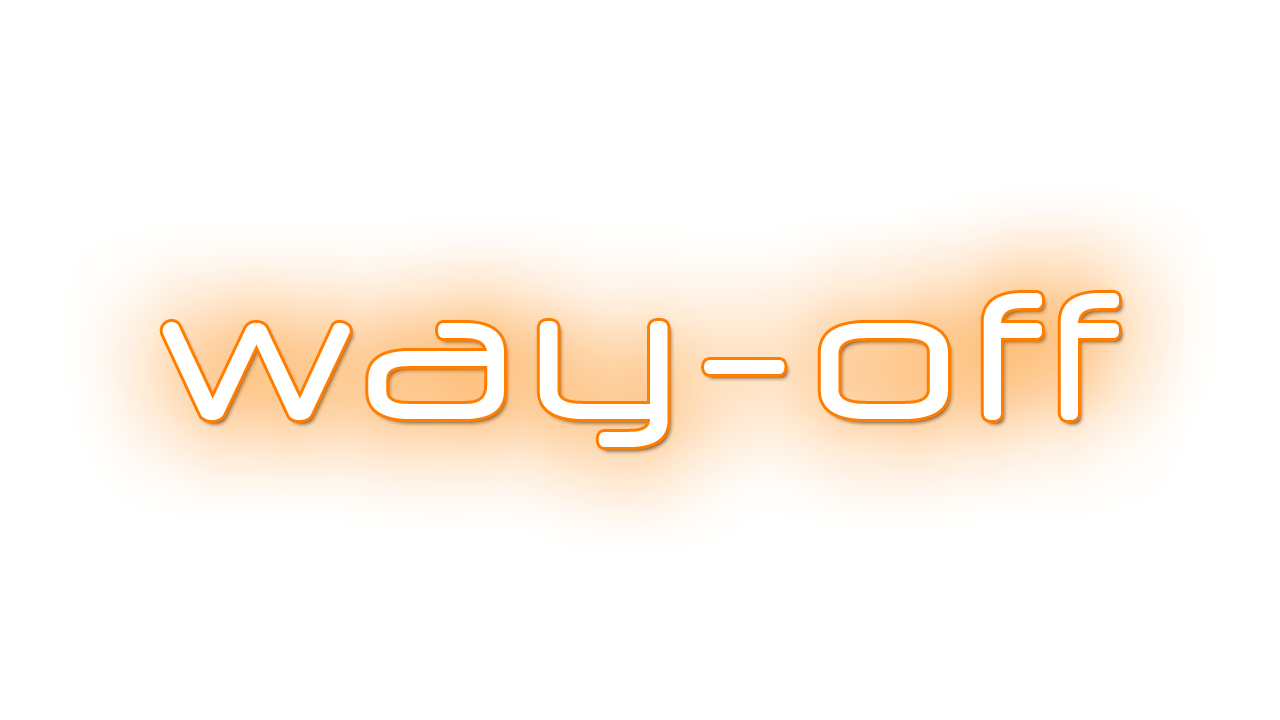
<style>
.page{position:relative;width:1280px;height:720px;background:#ffffff}
.page>*{position:absolute;margin:0}
.t1{font:180px "NeuropolXFree";color:#ffffff}
</style>
<div class="page">
<p class="t1" style="left:162px;top:293px;width:957px;height:154px">way-off</p>
</div>
